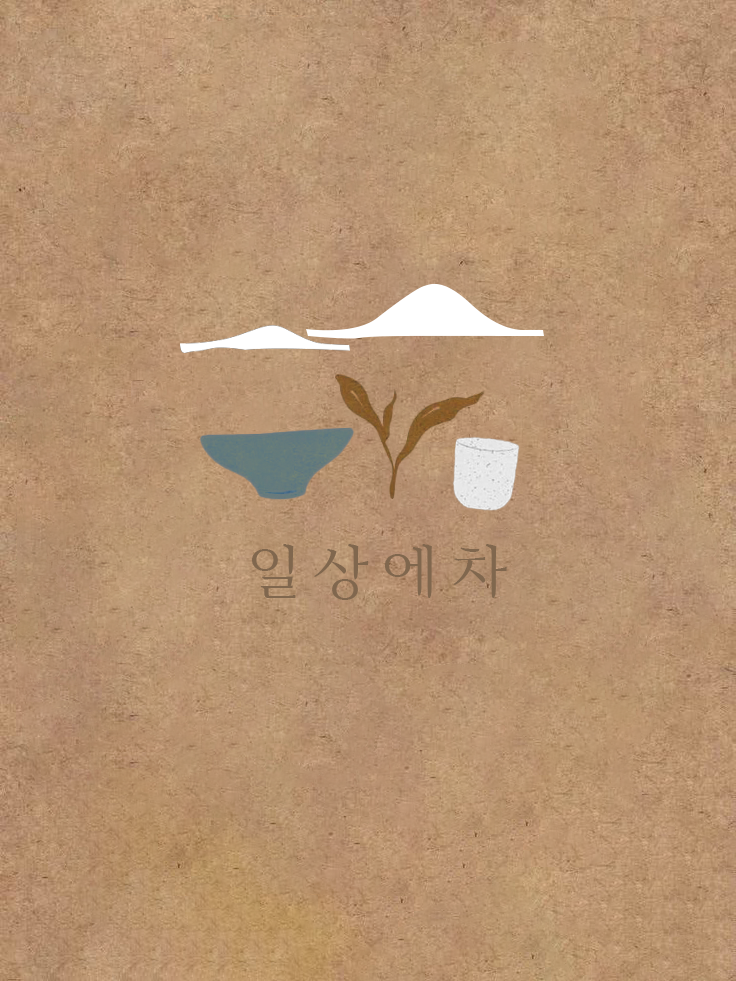
<style>
.page{position:relative;width:736px;height:981px}
.page>*{position:absolute;margin:0}
.t1{font:59.6px "AritaBuriKRMedium";letter-spacing:0.2em;color:#80674e}
</style>
<div class="page">
<p class="t1" style="left:252px;top:544px;width:255px;height:56px">일상에차</p>
</div>
